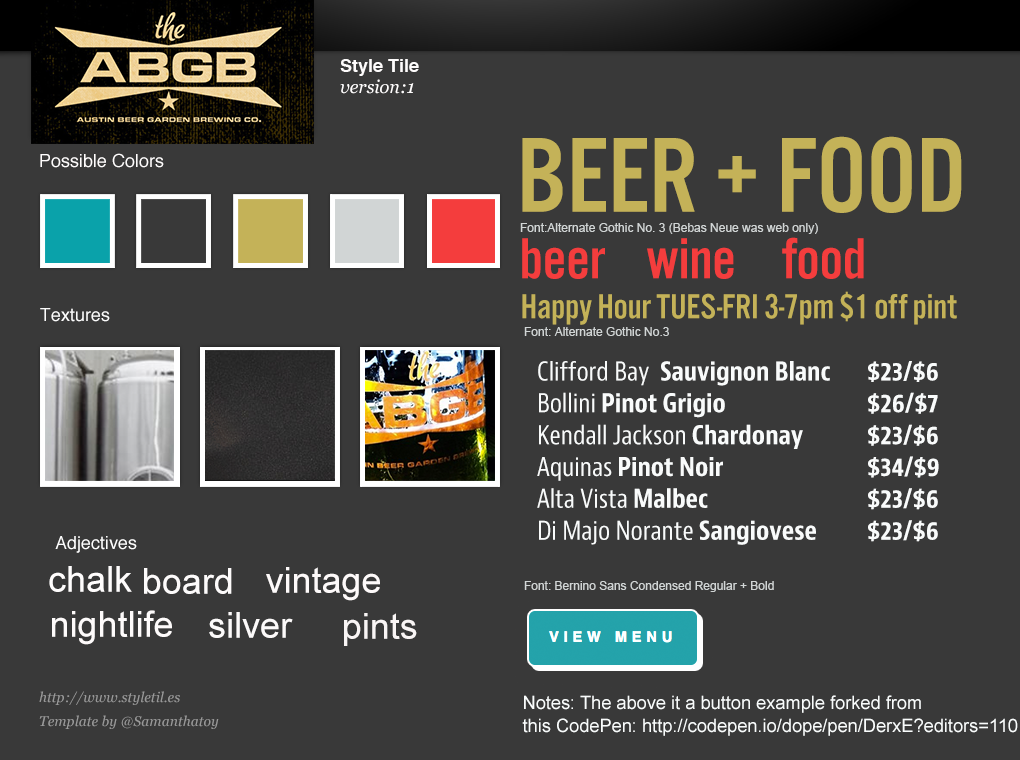
<style>
.page{position:relative;width:1020px;height:760px;background:#393939}
.page>*{position:absolute;margin:0}
.t1{font:18px "Helvetica-Bold";color:#fefcfc}
.t2{font:18px "Georgia-Italic";color:#fffdfd}
.t3{font:110.1px "AlternateGotNo3D";color:#c4b258}
.t4{font:18px "Helvetica";color:#fffdfd}
.t5{font:12px "ArialMT";color:#d1d5d5}
.t6{font:60.1px "AlternateGotNo3D";color:#f43d3d}
.t7{font:36px "AlternateGotNo3D";color:#c4b258}
.t8{font:36px "AlternateGotNo3D";color:#393939}
.t9{font:18px "Helvetica";color:#fbfbfb}
.t10{font:25.2px/31.9px "BerninoSans-CondensedBold";color:#f9fbfb}
.t11{font:25.2px/31.9px "BerninoSans-CondensedRegular";color:#f9fbfb}
.t12{font:18px "Helvetica";color:#fefefe}
.t13{font:36px "ArialMT";color:#fffdfd}
.t14{font:36px "ArialMT";color:#fdfbfb}
.t15{font:36px "ArialMT";color:#fefafa}
.t16{font:36px "ArialMT";color:#fefbfb}
.t17{font:36px "ArialMT";color:#fcfafa}
.t18{font:36px "ArialMT";color:#f9f5f5}
.t19{font:14px/24px "Georgia-Italic";color:#999999}
.t20{font:18.2px/23px "ArialMT";color:#f9fcfc}
</style>
<div class="page">
<p class="t1" style="left:340px;top:59px;width:79px;height:17px">Style Tile</p>
<p class="t2" style="left:340px;top:79px;width:74px;height:15px">version:1</p>
<p class="t3" style="left:522px;top:136px;width:440px;height:77px">BEER + FOOD</p>
<p class="t4" style="left:40px;top:153px;width:124px;height:15px">Possible Colors</p>
<p class="t5" style="left:520px;top:223px;width:298px;height:11px">Font:Alternate Gothic No. 3 (Bebas Neue was web only)</p>
<p class="t6" style="left:522px;top:237px;width:342px;height:42px">beer   wine     food</p>
<p class="t7" style="left:522px;top:291px;width:448px;height:34px">Happy Hour TUES-FRI 3-7pm $1 off pint<span class="t8">s</span></p>
<p class="t9" style="left:40px;top:308px;width:70px;height:14px">Textures</p>
<p class="t5" style="left:524px;top:327px;width:145px;height:9px">Font: Alternate Gothic No.3</p>
<p class="t10" style="left:537px;top:361px;width:402px;height:184px"><span class="t11">Clifford Bay</span>  Sauvignon Blanc  $23/$6<br><span class="t11">Bollini</span> Pinot Grigio     $26/$7<br><span class="t11">Kendall Jackson</span> Chardonay   $23/$6<br><span class="t11">Aquinas</span> Pinot Noir     $34/$9<br><span class="t11">Alta Vista</span> Malbec     $23/$6<br><span class="t11">Di Majo Norante</span> Sangiovese  $23/$6</p>
<p class="t12" style="left:55px;top:536px;width:82px;height:17px">Adjectives</p>
<p class="t13" style="left:49px;top:566px;width:83px;height:26px">chalk</p>
<p class="t14" style="left:144px;top:568px;width:88px;height:26px">board</p>
<p class="t15" style="left:266px;top:567px;width:114px;height:34px">vintage</p>
<p class="t5" style="left:524px;top:581px;width:250px;height:11px">Font: Bernino Sans Condensed Regular + Bold</p>
<p class="t16" style="left:52px;top:610px;width:120px;height:35px">nightlife</p>
<p class="t17" style="left:209px;top:612px;width:84px;height:26px">silver</p>
<p class="t18" style="left:344px;top:613px;width:73px;height:33px">pints</p>
<p class="t19" style="left:39px;top:691px;width:180px;height:38px">http://www.styletil.es<br>Template by @Samanthatoy</p>
<p class="t20" style="left:522px;top:695px;width:496px;height:41px">Notes: The above it a button example forked from <br>this CodePen: http://codepen.io/dope/pen/DerxE?editors=110</p>
</div>
